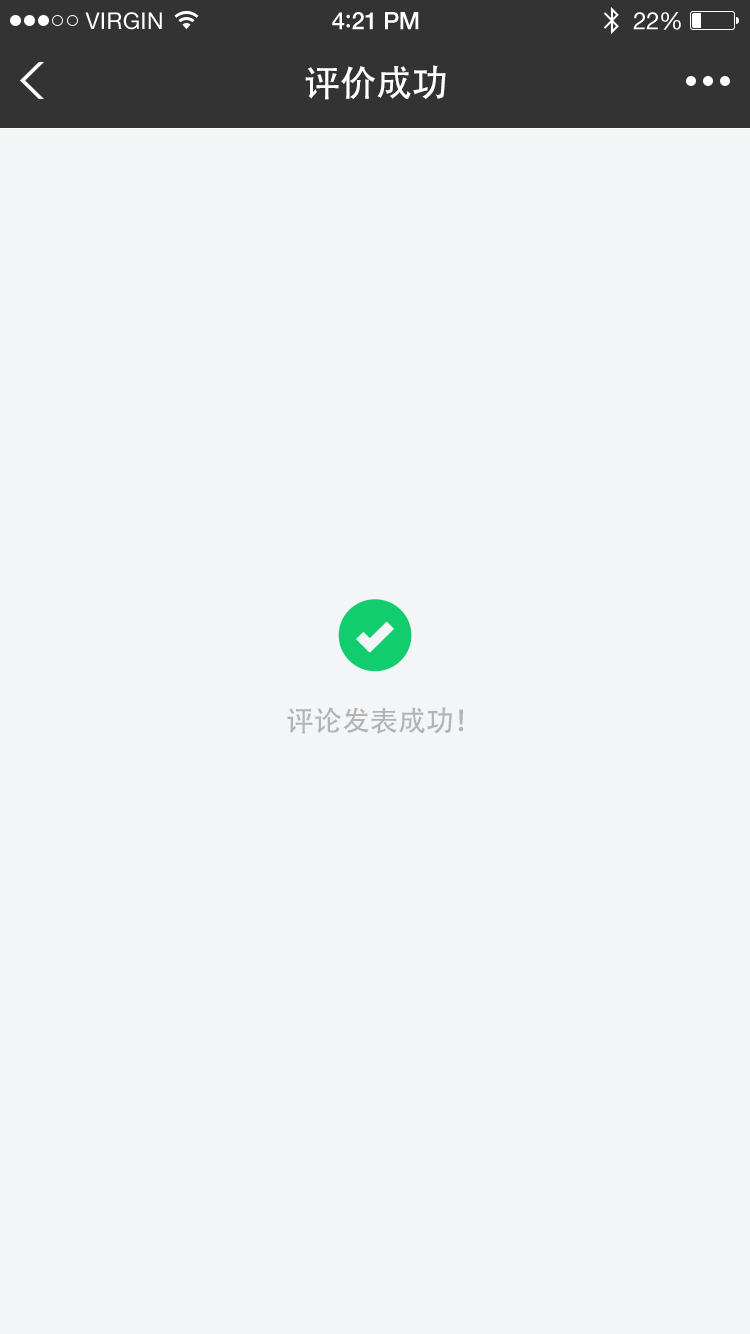
<style>
.page{position:relative;width:750px;height:1334px;background:#f3f5f7}
.page>*{position:absolute;margin:0}
.t1{font:36px "AdobeHeitiStd-Regular";color:#ffffff}
.t2{font:28px "AdobeHeitiStd-Regular";color:#b3b3b3}
</style>
<div class="page">
<p class="t1" style="left:305px;top:65px;width:141px;height:35px">评价成功</p>
<p class="t2" style="left:287px;top:707px;width:177px;height:27px">评论发表成功！</p>
</div>
